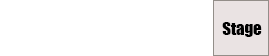
<style>
.page{position:relative;width:269px;height:56px;background:#ffffff}
.page>*{position:absolute;margin:0}
.t1{font:16.7px "Impact";color:#000000}
</style>
<div class="page">
<p class="t1" style="left:222px;top:22px;width:40px;height:15px">Stage</p>
</div>
